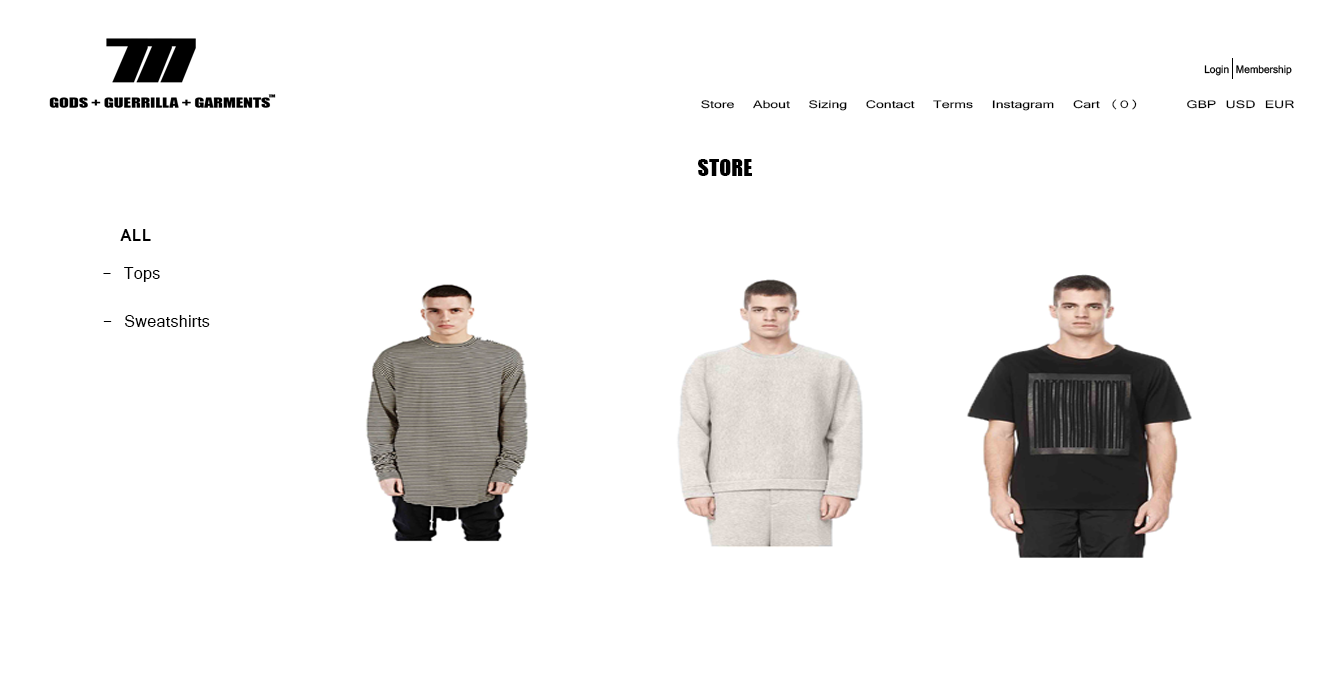
<style>
.page{position:relative;width:1332px;height:683px;background:#ffffff}
.page>*{position:absolute;margin:0}
.t1{font:11.7px "Vrinda";color:#000000;scale:1.35 1}
.t2{font:22.2px "Impact";color:#000000}
.t3{font:18.5px "Vrinda-Bold";color:#000000}
.t4{font:18.5px "Vrinda";color:#000000}
</style>
<div class="page">
<p class="t1" style="left:701px;top:99px;width:593px;height:12px">Store  About  Sizing  Contact  Terms  Instagram  Cart (0)     GBP USD EUR</p>
<p class="t2" style="left:698px;top:159px;width:54px;height:17px">STORE</p>
<p class="t3" style="left:120px;top:229px;width:31px;height:12px">ALL</p>
<p class="t4" style="left:103px;top:267px;width:57px;height:15px">- Tops</p>
<p class="t4" style="left:103px;top:315px;width:107px;height:12px">- Sweatshirts</p>
</div>
